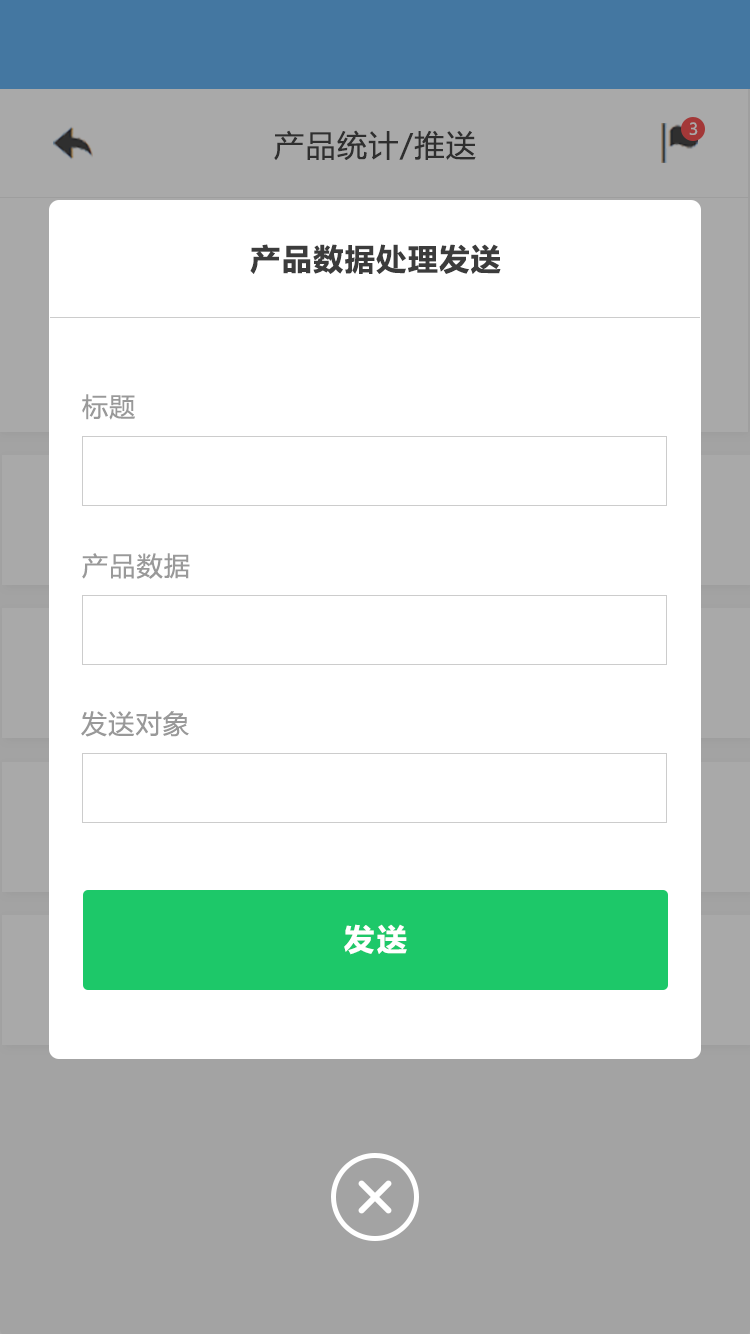
<style>
.page{position:relative;width:750px;height:1334px;background:#ffffff}
.page>*{position:absolute;margin:0}
.t1{font:16px "MicrosoftYaHeiUI";color:#a9a9a9}
.t2{font:30px "MicrosoftYaHeiUI";letter-spacing:0.05em;color:#333333}
.t3{font:30px "MicrosoftYaHeiUI-Bold";letter-spacing:0.05em;color:#3c3c3c}
.t4{font:26px "MicrosoftYaHeiUI";letter-spacing:0.05em;color:#999999}
.t5{font:30px "MicrosoftYaHeiUI-Bold";letter-spacing:0.1em;color:#ffffff}
</style>
<div class="page">
<p class="t1" style="left:689px;top:122px;width:9px;height:13px">3</p>
<p class="t2" style="left:274px;top:130px;width:202px;height:30px">产品统计/推送</p>
<p class="t3" style="left:250px;top:244px;width:251px;height:30px">产品数据处理发送</p>
<p class="t4" style="left:82px;top:394px;width:53px;height:26px">标题</p>
<p class="t4" style="left:82px;top:553px;width:108px;height:26px">产品数据</p>
<p class="t4" style="left:81px;top:711px;width:108px;height:26px">发送对象</p>
<p class="t5" style="left:344px;top:924px;width:63px;height:31px">发送</p>
</div>
